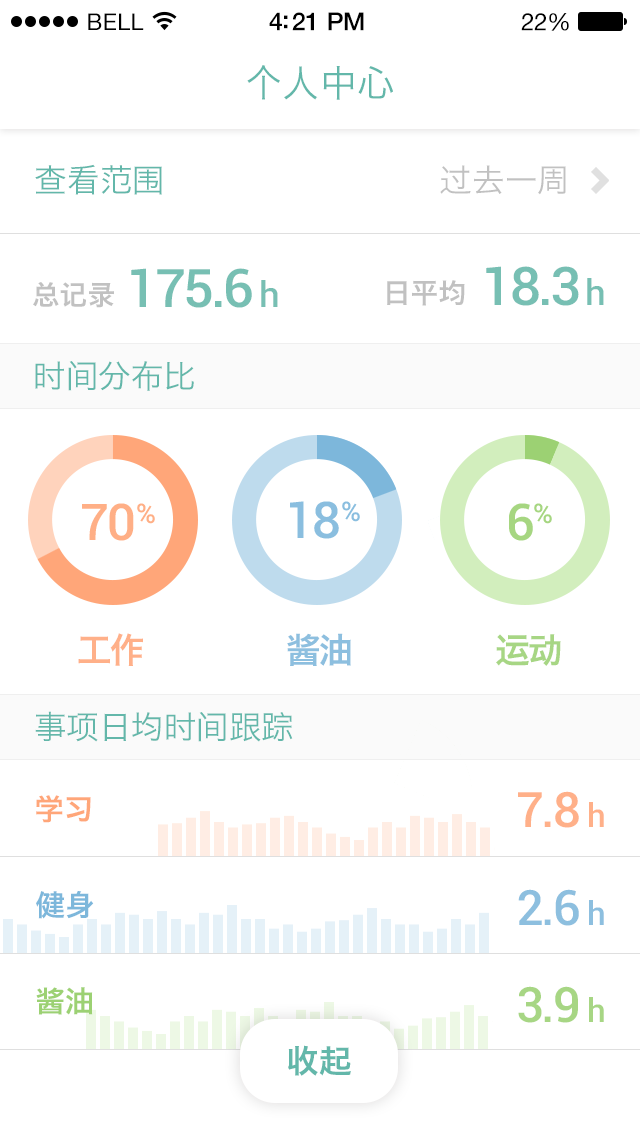
<style>
.page{position:relative;width:640px;height:1136px;background:#ffffff}
.page>*{position:absolute;margin:0}
.t1{font:23px "HelveticaNeue";letter-spacing:0.02em;color:#000000}
.t2{font:25px "HelveticaNeue-Medium";letter-spacing:-0.02em;color:#000000}
.t3{font:24px "HelveticaNeue";letter-spacing:-0.02em;color:#000000}
.t4{font:37.3px "HiraginoSansGB-W3";color:#63b7aa}
.t5{font:32.2px "HiraginoSansGB-W3";color:#63b7aa}
.t6{font:32.2px "HiraginoSansGB-W3";color:#c1c1c1}
.t7{font:53.3px "Roboto-Medium";letter-spacing:-0.05em;color:#63b7aa}
.t8{font:35.5px "Roboto-Medium";letter-spacing:-0.05em;color:#63b7aa;scale:1.04 1}
.t9{font:27.3px "HiraginoSansGB-W6";color:#c1c1c1}
.t10{font:50.7px "Roboto-Medium";letter-spacing:-0.05em;color:#ffaf86}
.t11{font:27.1px "Roboto-Medium";letter-spacing:-0.05em;color:#ffaf86}
.t12{font:50.7px "Roboto-Medium";letter-spacing:-0.05em;color:#8abedf}
.t13{font:27.1px "Roboto-Medium";letter-spacing:-0.05em;color:#8abedf}
.t14{font:50.7px "Roboto-Medium";letter-spacing:-0.05em;color:#a6d681}
.t15{font:27.1px "Roboto-Medium";letter-spacing:-0.05em;color:#a6d681}
.t16{font:34.8px "HiraginoSansGB-W6";letter-spacing:-0.05em;color:#ffa679}
.t17{font:34.8px "HiraginoSansGB-W6";letter-spacing:-0.05em;color:#7db7db}
.t18{font:34.8px "HiraginoSansGB-W6";letter-spacing:-0.05em;color:#9cd173}
.t19{font:29.4px "HiraginoSansGB-W6";color:#ffa679}
.t20{font:48.7px "Roboto-Medium";letter-spacing:-0.05em;color:#ffa679}
.t21{font:32.5px "Roboto-Medium";letter-spacing:-0.05em;color:#ffa679}
.t22{font:29.4px "HiraginoSansGB-W6";color:#7db7db}
.t23{font:48.7px "Roboto-Medium";letter-spacing:-0.05em;color:#7db7db}
.t24{font:32.5px "Roboto-Medium";letter-spacing:-0.05em;color:#7db7db}
.t25{font:29.4px "HiraginoSansGB-W6";color:#9cd173}
.t26{font:48.7px "Roboto-Medium";letter-spacing:-0.05em;color:#9cd173}
.t27{font:32.5px "Roboto-Medium";letter-spacing:-0.05em;color:#9cd173}
.t28{font:32.2px "HiraginoSansGB-W6";color:#63b7aa}
</style>
<div class="page">
<p class="t1" style="left:88px;top:13px;width:56px;height:17px">BELL</p>
<p class="t2" style="left:269px;top:12px;width:95px;height:19px">4:21 PM</p>
<p class="t3" style="left:521px;top:13px;width:48px;height:18px">22%</p>
<p class="t4" style="left:247px;top:65px;width:146px;height:35px">个人中心</p>
<p class="t5" style="left:35px;top:164px;width:127px;height:31px">查看范围</p>
<p class="t6" style="left:440px;top:165px;width:126px;height:30px">过去一周</p>
<p class="t7" style="left:131px;top:268px;width:121px;height:40px;opacity:0.9">175.6</p>
<p class="t7" style="left:486px;top:266px;width:93px;height:40px;opacity:0.9">18.3</p>
<p class="t8" style="left:261px;top:280px;width:17px;height:27px;opacity:0.9">h</p>
<p class="t9" style="left:387px;top:280px;width:78px;height:26px">日平均</p>
<p class="t8" style="left:587px;top:278px;width:17px;height:27px;opacity:0.9">h</p>
<p class="t9" style="left:33px;top:282px;width:81px;height:26px">总记录</p>
<p class="t5" style="left:35px;top:361px;width:159px;height:30px">时间分布比</p>
<p class="t10" style="left:82px;top:503px;width:52px;height:38px">70</p>
<p class="t11" style="left:137px;top:503px;width:18px;height:21px">%</p>
<p class="t12" style="left:290px;top:501px;width:49px;height:38px">18</p>
<p class="t13" style="left:342px;top:501px;width:18px;height:21px">%</p>
<p class="t14" style="left:509px;top:503px;width:24px;height:38px">6</p>
<p class="t15" style="left:534px;top:503px;width:18px;height:21px">%</p>
<p class="t16" style="left:78px;top:633px;width:65px;height:33px;opacity:0.9">工作</p>
<p class="t17" style="left:287px;top:633px;width:64px;height:33px;opacity:0.9">酱油</p>
<p class="t18" style="left:496px;top:634px;width:65px;height:32px;opacity:0.9">运动</p>
<p class="t5" style="left:35px;top:711px;width:258px;height:31px">事项日均时间跟踪</p>
<p class="t19" style="left:36px;top:795px;width:55px;height:28px">学习</p>
<p class="t20" style="left:518px;top:791px;width:61px;height:37px;opacity:0.9">7.8</p>
<p class="t21" style="left:589px;top:802px;width:15px;height:25px;opacity:0.9">h</p>
<p class="t22" style="left:36px;top:891px;width:58px;height:28px">健身</p>
<p class="t23" style="left:518px;top:889px;width:61px;height:37px;opacity:0.9">2.6</p>
<p class="t24" style="left:589px;top:900px;width:15px;height:25px;opacity:0.9">h</p>
<p class="t25" style="left:36px;top:987px;width:57px;height:28px">酱油</p>
<p class="t26" style="left:518px;top:986px;width:60px;height:37px;opacity:0.9">3.9</p>
<p class="t27" style="left:589px;top:997px;width:15px;height:25px;opacity:0.9">h</p>
<p class="t28" style="left:288px;top:1045px;width:63px;height:31px">收起</p>
</div>
